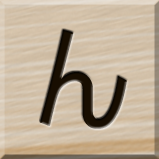
<style>
.page{position:relative;width:159px;height:159px}
.page>*{position:absolute;margin:0}
.t1{font:116px "MS-UIGothic";color:#180e01}
</style>
<div class="page">
<p class="t1" style="left:40px;top:29px;width:87px;height:100px">ん</p>
</div>
